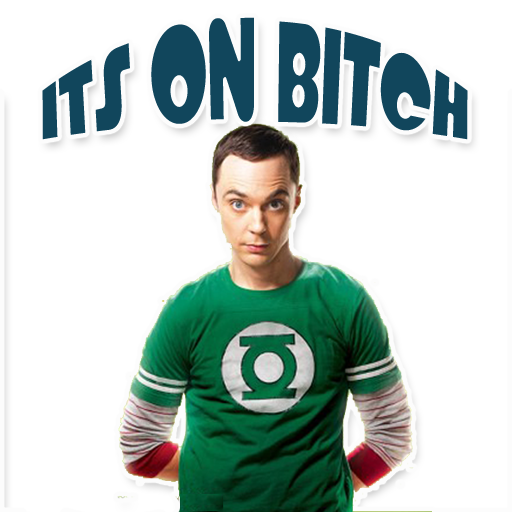
<style>
.page{position:relative;width:512px;height:512px;background:#ffffff}
.page>*{position:absolute;margin:0}
.t1{font:66.4px "CrystalRadioKit-Regular";color:#11465c;scale:1.07 1}
</style>
<div class="page">
<p class="t1" style="left:42px;top:17px;width:426px;height:123px;text-align:center">ITS ON BITCH</p>
</div>
